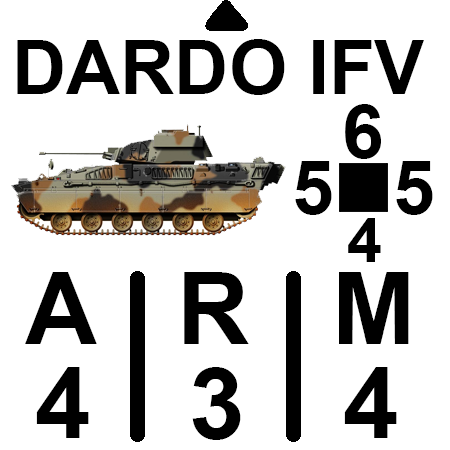
<style>
.page{position:relative;width:450px;height:450px;background:#ffffff}
.page>*{position:absolute;margin:0}
.t1{font:75px "Arial-BoldMT";color:#000000}
.t2{font:62.5px "Arial-BoldMT";color:#000000}
.t3{font:100px "Arial-BoldMT";color:#000000}
</style>
<div class="page">
<p class="t1" style="left:17px;top:39px;width:407px;height:56px">DARDO IFV</p>
<p class="t1" style="left:345px;top:104px;width:36px;height:55px">6</p>
<p class="t1" style="left:295px;top:161px;width:37px;height:54px">5</p>
<p class="t1" style="left:396px;top:161px;width:37px;height:54px">5</p>
<p class="t2" style="left:348px;top:218px;width:33px;height:44px">4</p>
<p class="t3" style="left:25px;top:272px;width:384px;height:72px">A   R   M</p>
<p class="t3" style="left:36px;top:367px;width:53px;height:71px">4</p>
<p class="t3" style="left:192px;top:367px;width:49px;height:73px">3</p>
<p class="t3" style="left:344px;top:367px;width:53px;height:71px">4</p>
</div>
